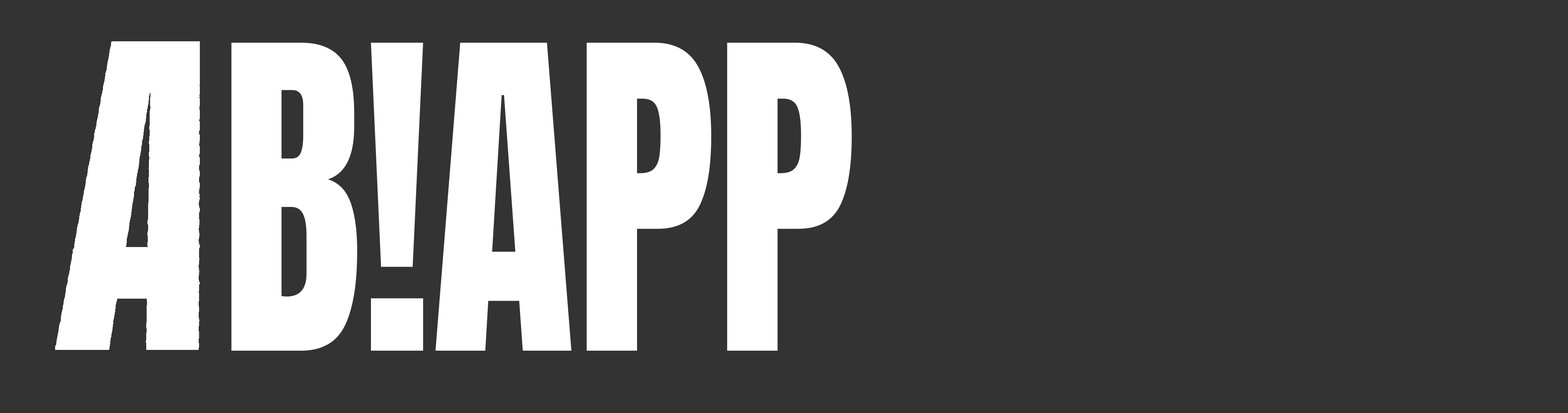
<style>
.page{position:relative;width:1568px;height:413px;background:#333333}
.page>*{position:absolute;margin:0}
.t1{font:358.9px "Anton-Regular";color:#ffffff;scale:0.83 1}
</style>
<div class="page">
<p class="t1" style="left:231px;top:42px;width:621px;height:309px">B!APP</p>
</div>
